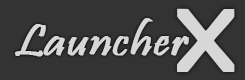
<style>
.page{position:relative;width:245px;height:80px;background:#333333}
.page>*{position:absolute;margin:0}
.t1{font:92px "BerlinSansFB-Reg";color:#d7d7d7;scale:1.2 1}
.t2{font:44.1px "Pristina-Regular";color:#d7d7d7;font-weight:bold;scale:1.2 1}
</style>
<div class="page">
<p class="t1" style="left:177px;top:8px;width:58px;height:64px">X</p>
<p class="t2" style="left:15px;top:18px;width:174px;height:39px">Launcher</p>
</div>
